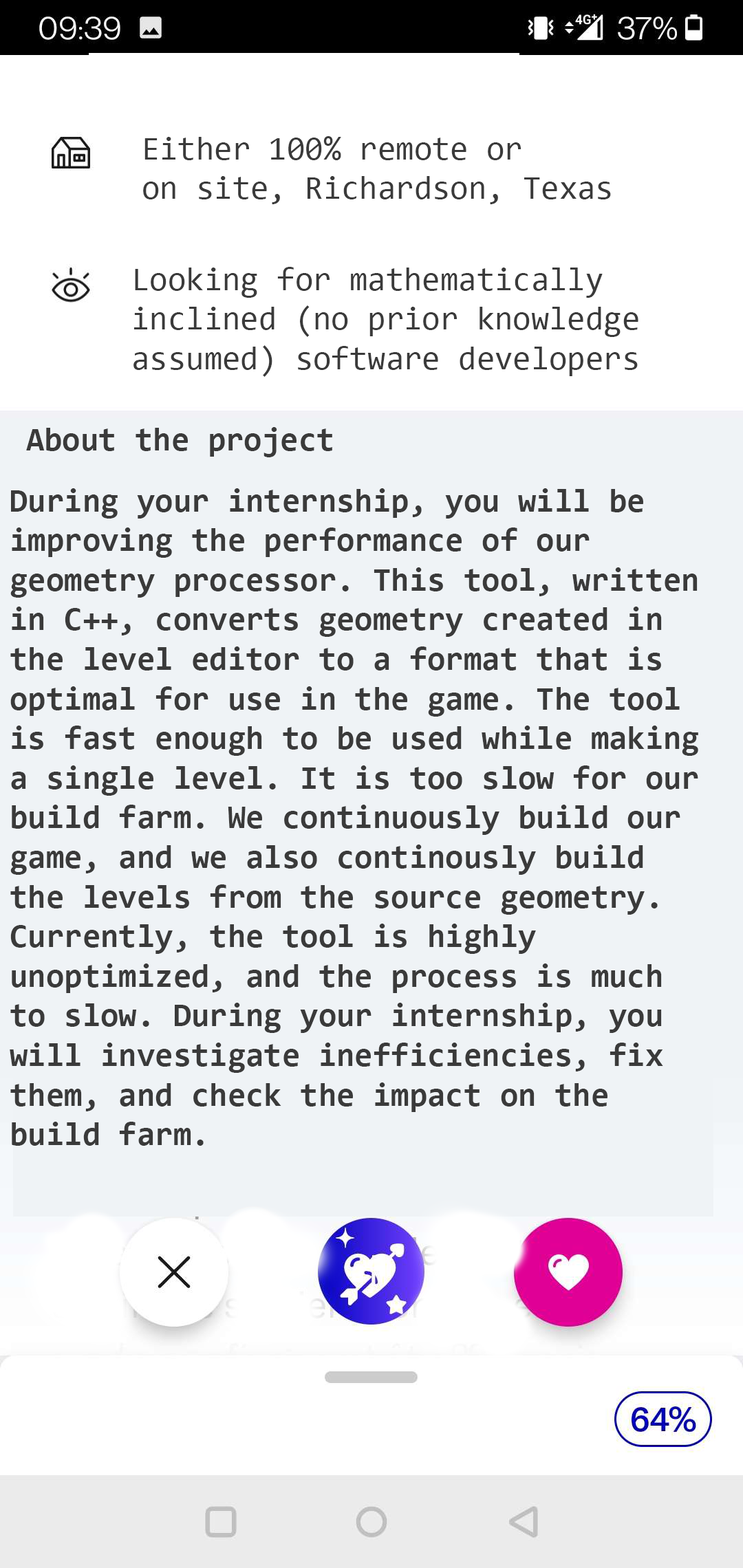
<style>
.page{position:relative;width:743px;height:1568px;background:#eff3f6}
.page>*{position:absolute;margin:0}
.t1{font:33px "Consolas";color:#3a3a3a}
.t2{font:33px "Consolas-Bold";color:#3a3a3a}
</style>
<div class="page">
<p class="t1" style="left:143px;top:136px;width:468px;height:68px">Either 100% remote or<br>on site, Richardson, Texas</p>
<p class="t1" style="left:133px;top:267px;width:505px;height:110px">Looking for mathematically <br>inclined (no prior knowledge <br>assumed) software developers</p>
<p class="t2" style="left:26px;top:427px;width:306px;height:30px">About the project</p>
<p class="t2" style="left:10px;top:488px;width:688px;height:658px">During your internship, you will be improving the performance of our geometry processor. This tool, written in C++, converts geometry created in the level editor to a format that is optimal for use in the game. The tool is fast enough to be used while making a single level. It is too slow for our build farm. We continuously build our game, and we also continously build the levels from the source geometry. Currently, the tool is highly unoptimized, and the process is much to slow. During your internship, you will investigate inefficiencies, fix them, and check the impact on the build farm.</p>
</div>
